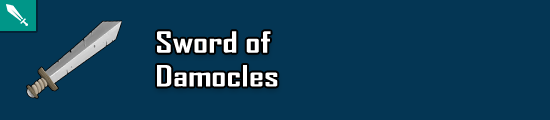
<style>
.page{position:relative;width:550px;height:120px;background:#043654}
.page>*{position:absolute;margin:0}
.t1{font:28.2px "AgencyFB-Bold";color:#ffffff;scale:1.33 1}
</style>
<div class="page">
<p class="t1" style="left:157px;top:31px;width:121px;height:56px">Sword of <br>Damocles</p>
</div>
